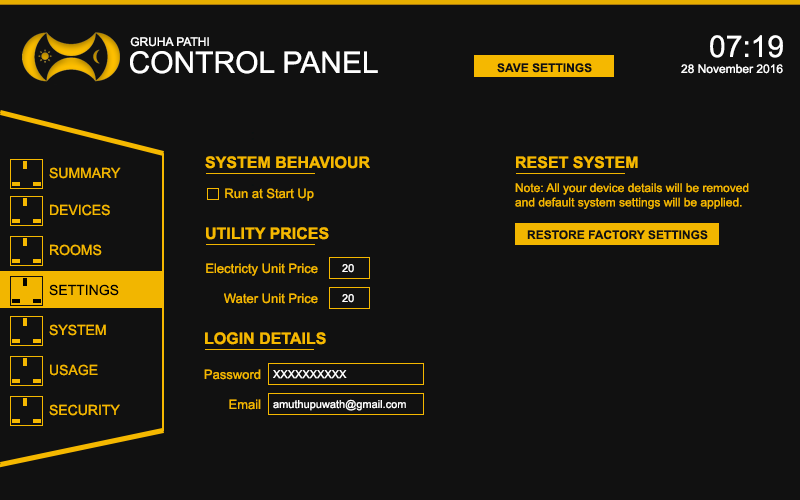
<style>
.page{position:relative;width:800px;height:500px;background:#111111}
.page>*{position:absolute;margin:0}
.t1{font:12px "ArialMT";color:#ffffff}
.t2{font:30px "ArialMT";color:#ffffff}
.t3{font:12px "Arial-BoldMT";color:#111111;text-transform:uppercase}
.t4{font:16px "Arial-BoldMT";color:#f5b800}
.t5{font:14px "ArialMT";color:#f2b600}
.t6{font:12px "ArialMT";color:#f5b800}
.t7{font:13px "ArialMT";color:#f5b800}
.t8{font:14px "ArialMT";color:#f5b800}
.t9{font:11px "ArialMT";color:#ffffff}
.t10{font:14px "ArialMT";color:#000000}
</style>
<div class="page">
<p class="t1" style="left:130px;top:37px;width:79px;height:10px">GRUHA PATHI</p>
<p class="t2" style="left:710px;top:35px;width:73px;height:23px">07:19</p>
<p class="t2" style="left:130px;top:51px;width:248px;height:23px">CONTROL PANEL</p>
<p class="t3" style="left:497px;top:63px;width:95px;height:10px">SAVE SETTINGS</p>
<p class="t1" style="left:681px;top:64px;width:102px;height:10px">28 November 2016</p>
<p class="t4" style="left:205px;top:156px;width:165px;height:13px">SYSTEM BEHAVIOUR</p>
<p class="t4" style="left:516px;top:156px;width:122px;height:13px">RESET SYSTEM</p>
<p class="t5" style="left:49px;top:167px;width:72px;height:12px">SUMMARY</p>
<p class="t6" style="left:515px;top:183px;width:234px;height:26px">Note: All your device details will be removed <br>and default system settings will be applied.</p>
<p class="t7" style="left:225px;top:188px;width:89px;height:13px">Run at Start Up</p>
<p class="t8" style="left:50px;top:204px;width:60px;height:12px">DEVICES</p>
<p class="t4" style="left:206px;top:227px;width:123px;height:13px">UTILITY PRICES</p>
<p class="t3" style="left:527px;top:230px;width:181px;height:10px">RESTORE FACTORY SETTINGS</p>
<p class="t8" style="left:50px;top:244px;width:52px;height:12px">ROOMS</p>
<p class="t7" style="left:206px;top:263px;width:112px;height:13px">Electricty Unit Price</p>
<p class="t9" style="left:342px;top:264px;width:12px;height:9px">20</p>
<p class="t10" style="left:49px;top:284px;width:70px;height:12px">SETTINGS</p>
<p class="t7" style="left:224px;top:293px;width:94px;height:11px">Water Unit Price</p>
<p class="t9" style="left:342px;top:294px;width:12px;height:9px">20</p>
<p class="t8" style="left:49px;top:324px;width:57px;height:12px">SYSTEM</p>
<p class="t4" style="left:205px;top:332px;width:121px;height:13px">LOGIN DETAILS</p>
<p class="t5" style="left:50px;top:364px;width:48px;height:12px">USAGE</p>
<p class="t7" style="left:204px;top:369px;width:57px;height:11px">Password</p>
<p class="t9" style="left:273px;top:370px;width:74px;height:9px">XXXXXXXXXX</p>
<p class="t7" style="left:229px;top:399px;width:32px;height:11px">Email</p>
<p class="t9" style="left:273px;top:399px;width:133px;height:12px">amuthupuwath@gmail.com</p>
<p class="t8" style="left:49px;top:404px;width:71px;height:12px">SECURITY</p>
</div>
